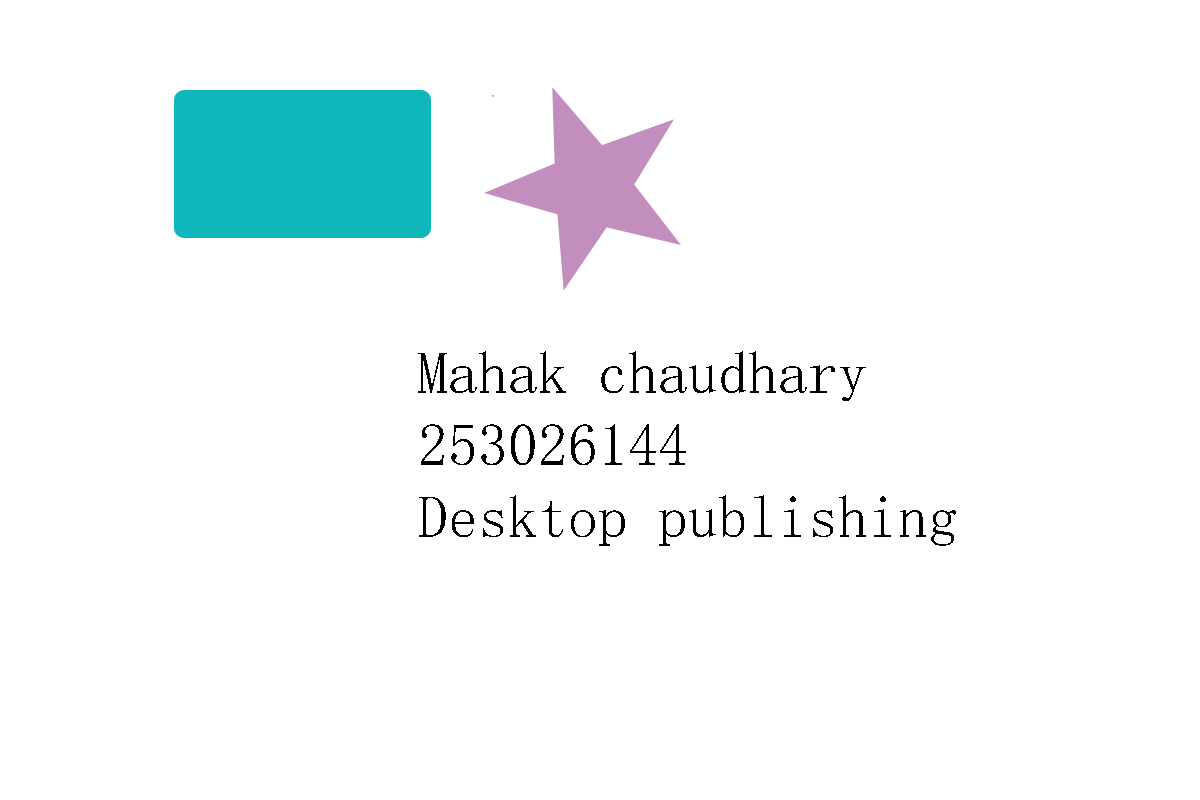
<style>
.page{position:relative;width:1200px;height:800px;background:#ffffff}
.page>*{position:absolute;margin:0}
.t1{font:60px "SimSun-ExtB";color:#000000}
</style>
<div class="page">
<p class="t1" style="left:418px;top:351px;width:538px;height:195px">Mahak chaudhary<br>253026144<br>Desktop publishing</p>
</div>
